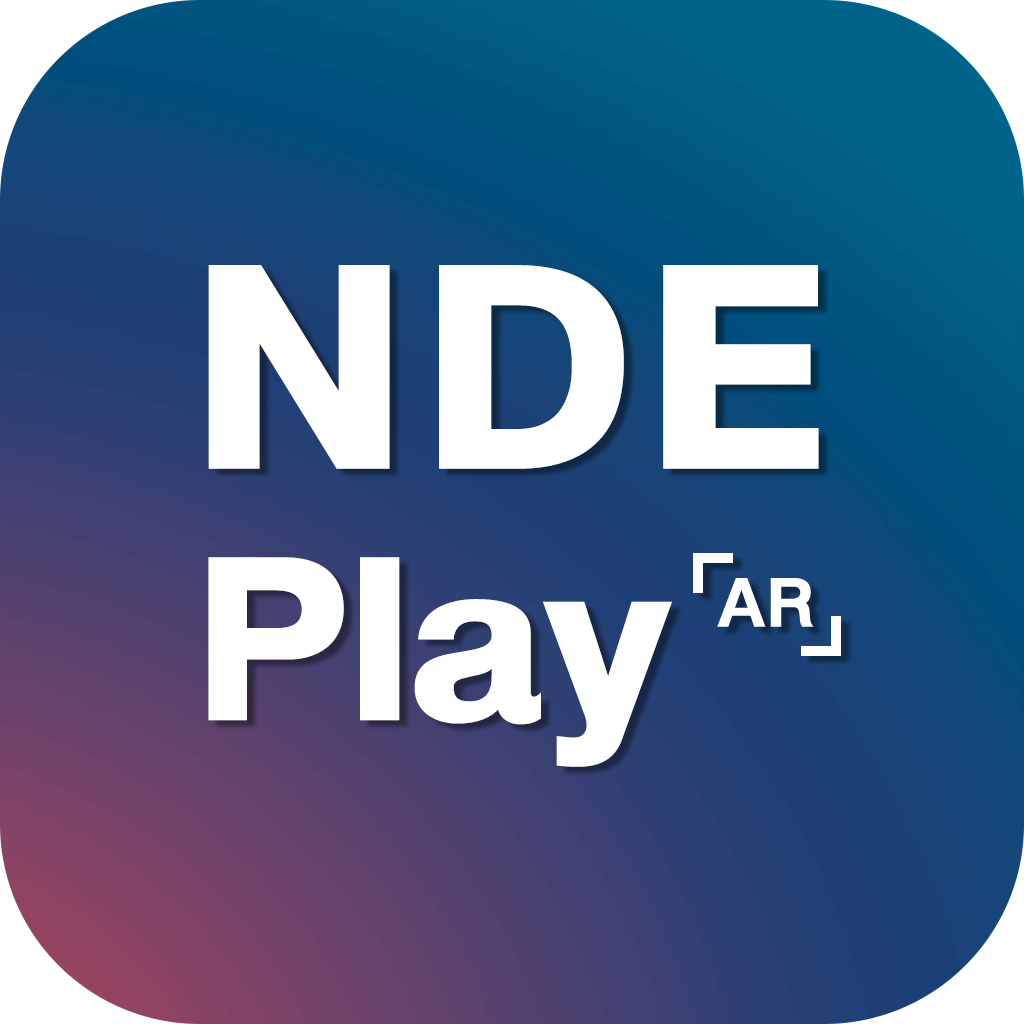
<style>
.page{position:relative;width:1024px;height:1024px}
.page>*{position:absolute;margin:0}
.t1{font:416.7px "DBHelvethaicaX-Blk";letter-spacing:0.05em;color:#ffffff}
.t2{font:333.3px "DBHelvethaicaX-Blk";letter-spacing:0.01em;color:#ffffff}
.t3{font:100px "DBHelvethaicaX-Bd";letter-spacing:0.01em;color:#ffffff}
</style>
<div class="page">
<p class="t1" style="left:208px;top:265px;width:611px;height:204px">NDE</p>
<p class="t2" style="left:208px;top:557px;width:464px;height:210px">Play</p>
<p class="t3" style="left:717px;top:578px;width:97px;height:49px">AR</p>
</div>
